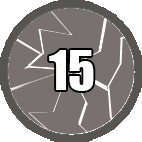
<style>
.page{position:relative;width:142px;height:142px;background:#797171}
.page>*{position:absolute;margin:0}
.t1{font:50px "Impact";color:#ffffff}
</style>
<div class="page">
<p class="t1" style="left:49px;top:50px;width:45px;height:41px">15</p>
</div>
